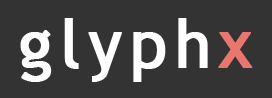
<style>
.page{position:relative;width:272px;height:98px;background:#333333}
.page>*{position:absolute;margin:0}
.t1{font:66px "TrebuchetMS";letter-spacing:0.1em;color:#ffffff;font-weight:bold}
.t2{font:66px "TrebuchetMS";letter-spacing:0.1em;color:#e97770;font-weight:bold}
</style>
<div class="page">
<p class="t1" style="left:20px;top:18px;width:233px;height:64px">glyph<span class="t2">x</span></p>
</div>
